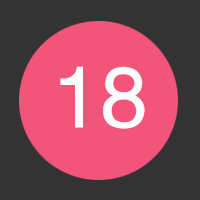
<style>
.page{position:relative;width:200px;height:200px;background:#333333}
.page>*{position:absolute;margin:0}
.t1{font:86.1px "FZHTJW--GB1-0";color:#ffffff}
</style>
<div class="page">
<p class="t1" style="left:60px;top:66px;width:85px;height:63px">18</p>
</div>
